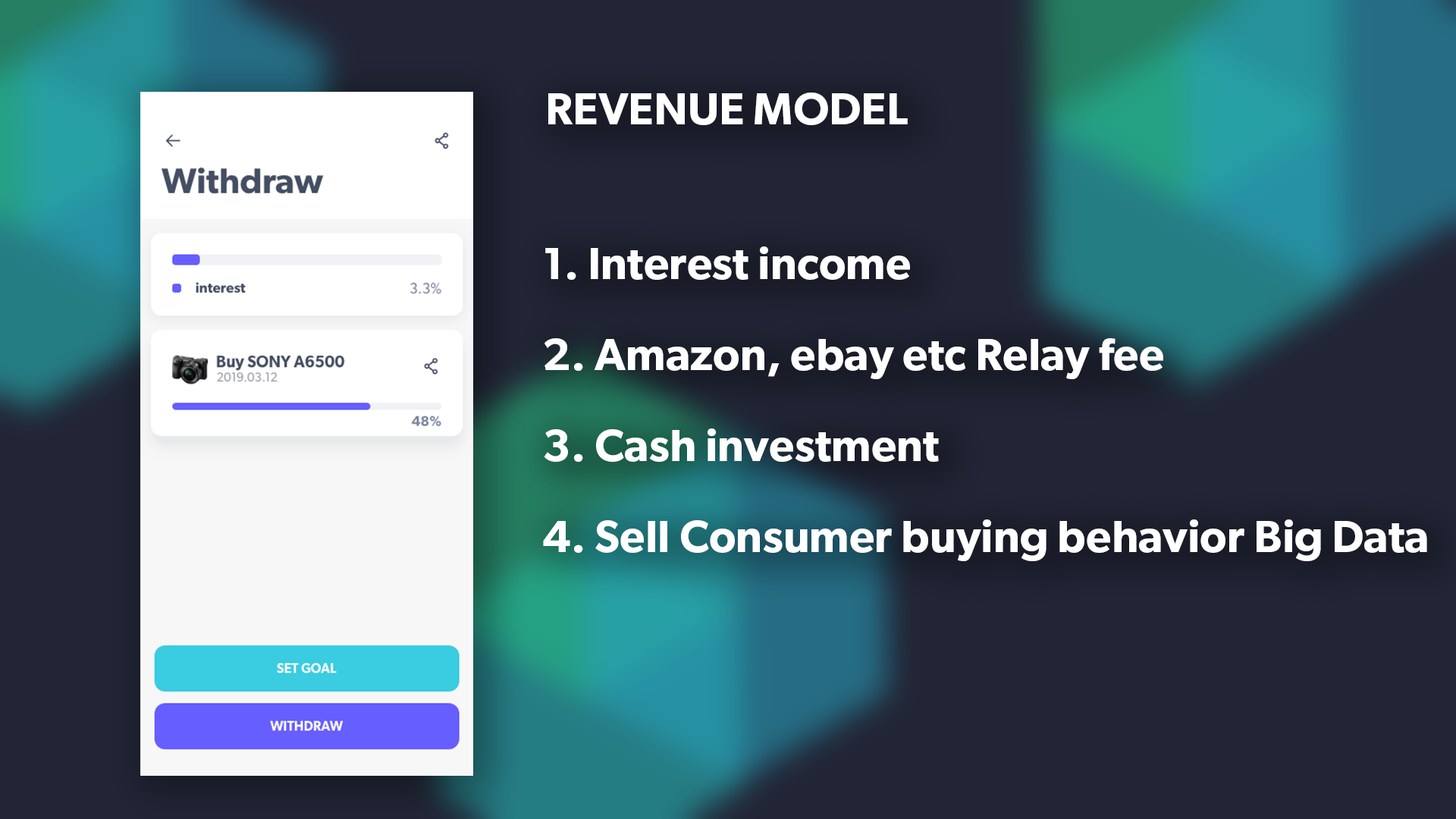
<style>
.page{position:relative;width:1456px;height:819px;background:#222536}
.page>*{position:absolute;margin:0}
.t1{font:45.5px "Gibson-SemiBold";color:#ffffff}
.t2{font:45.5px/45.5px "Gibson-SemiBold";color:#ffffff}
</style>
<div class="page">
<p class="t1" style="left:548px;top:93px;width:360px;height:32px">REVENUE MODEL</p>
<p class="t2" style="left:543px;top:246px;width:884px;height:315px">1. Interest income<br><br>2. Amazon, ebay etc Relay fee<br><br>3. Cash investment<br><br>4. Sell Consumer buying behavior Big Data</p>
</div>
